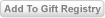
<style>
.page{position:relative;width:105px;height:18px}
.page>*{position:absolute;margin:0}
.t1{font:10px "Arial-BoldMT";color:#838282}
</style>
<div class="page">
<p class="t1" style="left:4px;top:5px;width:97px;height:10px">Add To Gift Registry</p>
</div>
